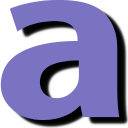
<style>
.page{position:relative;width:128px;height:128px;background:#7973c2}
.page>*{position:absolute;margin:0}
.t1{font:233.3px "Myriad-Bold";color:#7973c2;scale:1.14 1}
</style>
<div class="page">
<p class="t1" style="left:0px;top:0px;width:120px;height:120px">a</p>
</div>
